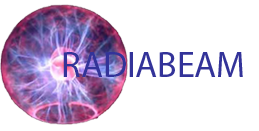
<style>
.page{position:relative;width:259px;height:131px;background:#ffffff}
.page>*{position:absolute;margin:0}
.t1{font:36px "MyriadPro-Regular";color:#333399}
</style>
<div class="page">
<p class="t1" style="left:63px;top:52px;width:180px;height:25px">RADIABEAM</p>
</div>
